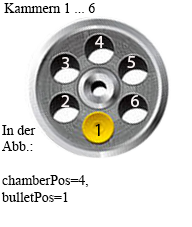
<style>
.page{position:relative;width:192px;height:227px;background:#ffffff}
.page>*{position:absolute;margin:0}
.t1{font:14px "TimesNewRomanPSMT";color:#000000}
.t2{font:18px "MyriadPro-Regular";color:#f8f1f1}
.t3{font:18px "MyriadPro-Regular";color:#f9f5f5}
.t4{font:14px "TimesNewRomanPSMT";color:#030303}
.t5{font:18px "MyriadPro-Regular";color:#000000}
</style>
<div class="page">
<p class="t1" style="left:4px;top:3px;width:91px;height:10px">Kammern 1 ... 6</p>
<p class="t2" style="left:95px;top:36px;width:9px;height:12px">4</p>
<p class="t2" style="left:61px;top:57px;width:8px;height:12px">3</p>
<p class="t2" style="left:127px;top:56px;width:8px;height:12px">5</p>
<p class="t2" style="left:61px;top:95px;width:9px;height:12px">2</p>
<p class="t3" style="left:131px;top:95px;width:8px;height:12px">6</p>
<p class="t4" style="left:1px;top:125px;width:88px;height:77px">In der <br>Abb.:<br><br>chamberPos=4, <br>bulletPos=1</p>
<p class="t5" style="left:95px;top:124px;width:5px;height:12px">1</p>
</div>
